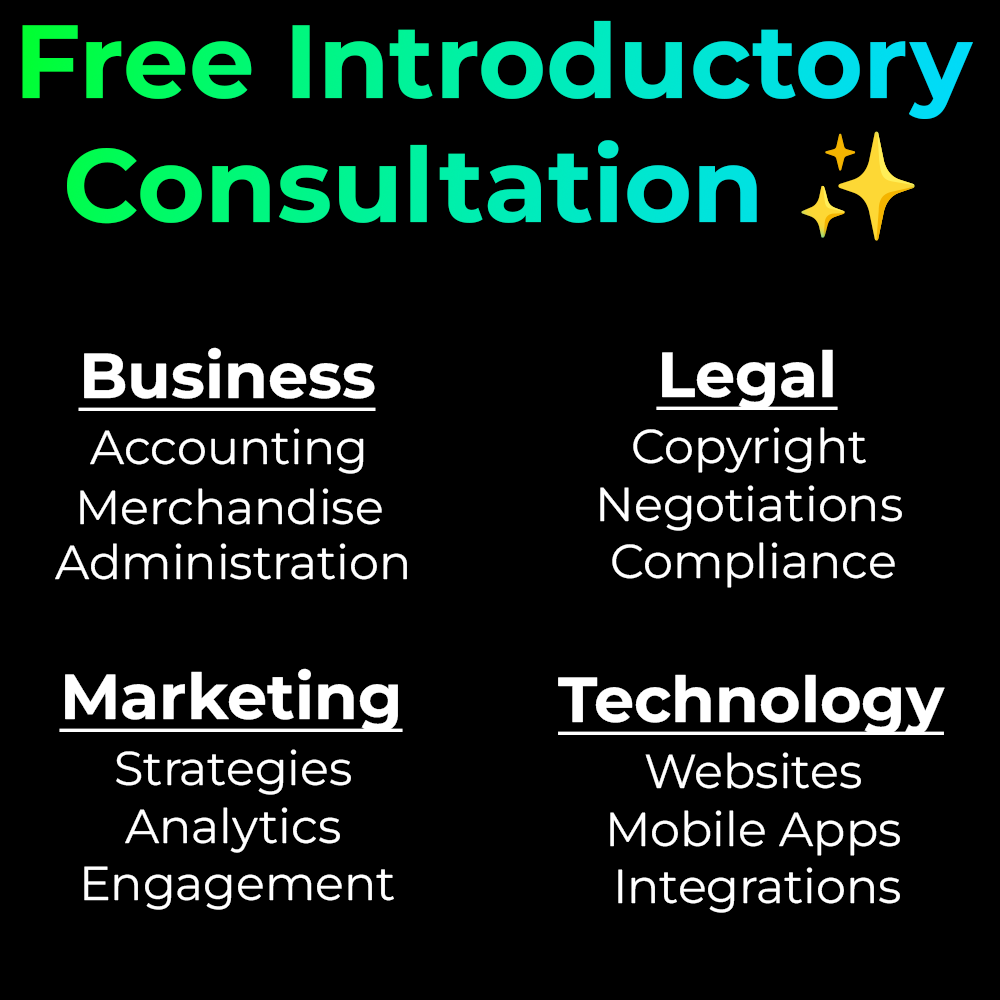
<style>
.page{position:relative;width:1000px;height:1000px;background:#000000}
.page>*{position:absolute;margin:0}
.t1{font:103.9px "MontserratRoman-Bold"}
.t2{font:103.9px "NotoColorEmoji-SVG"}
.t3{font:63.5px "MontserratRoman-Bold";color:#ffffff;text-decoration:underline}
.t4{font:47.6px "MontserratRoman-Regular";color:#ffffff}
</style>
<div class="page">
<p class="t1" style="left:22px;top:20px;width:951px;height:221px;text-align:center">Free Introductory<br>Consultation <span class="t2">✨</span></p>
<p class="t3" style="left:78px;top:347px;width:298px;height:64px">Business</p>
<p class="t3" style="left:656px;top:349px;width:182px;height:61px">Legal</p>
<p class="t4" style="left:90px;top:428px;width:274px;height:46px">Accounting</p>
<p class="t4" style="left:633px;top:427px;width:233px;height:46px">Copyright</p>
<p class="t4" style="left:600px;top:485px;width:302px;height:46px">Negotiations</p>
<p class="t4" style="left:80px;top:488px;width:302px;height:37px">Merchandise</p>
<p class="t4" style="left:55px;top:543px;width:352px;height:37px">Administration</p>
<p class="t4" style="left:612px;top:542px;width:283px;height:46px">Compliance</p>
<p class="t3" style="left:59px;top:668px;width:344px;height:64px">Marketing</p>
<p class="t3" style="left:558px;top:674px;width:387px;height:61px">Technology</p>
<p class="t4" style="left:116px;top:749px;width:235px;height:46px">Strategies</p>
<p class="t4" style="left:645px;top:752px;width:216px;height:37px">Websites</p>
<p class="t4" style="left:125px;top:807px;width:215px;height:46px">Analytics</p>
<p class="t4" style="left:610px;top:810px;width:290px;height:46px">Mobile Apps</p>
<p class="t4" style="left:84px;top:866px;width:310px;height:44px">Engagement</p>
<p class="t4" style="left:618px;top:867px;width:282px;height:46px">Integrations</p>
</div>
